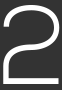
<style>
.page{position:relative;width:62px;height:90px;background:#333333}
.page>*{position:absolute;margin:0}
.t1{font:111.8px "NexaLight";color:#ffffff;scale:0.92 1}
</style>
<div class="page">
<p class="t1" style="left:3px;top:5px;width:57px;height:79px">2</p>
</div>
